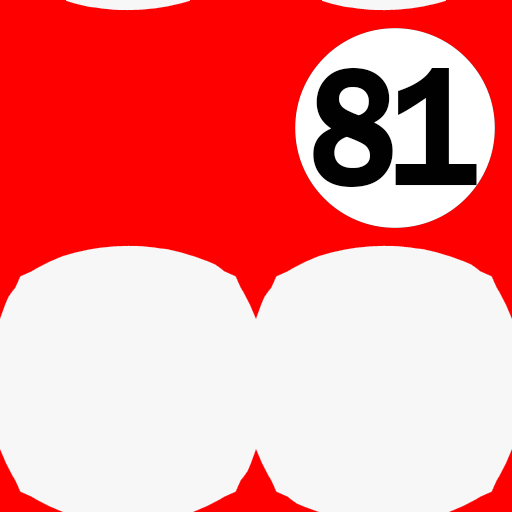
<style>
.page{position:relative;width:512px;height:512px;background:#f7f7f7}
.page>*{position:absolute;margin:0}
.t1{font:172.5px "FranklinGothic-Demi";letter-spacing:-0.05em;color:#010101;scale:0.87 1}
</style>
<div class="page">
<p class="t1" style="left:313px;top:68px;width:164px;height:119px">81</p>
</div>
